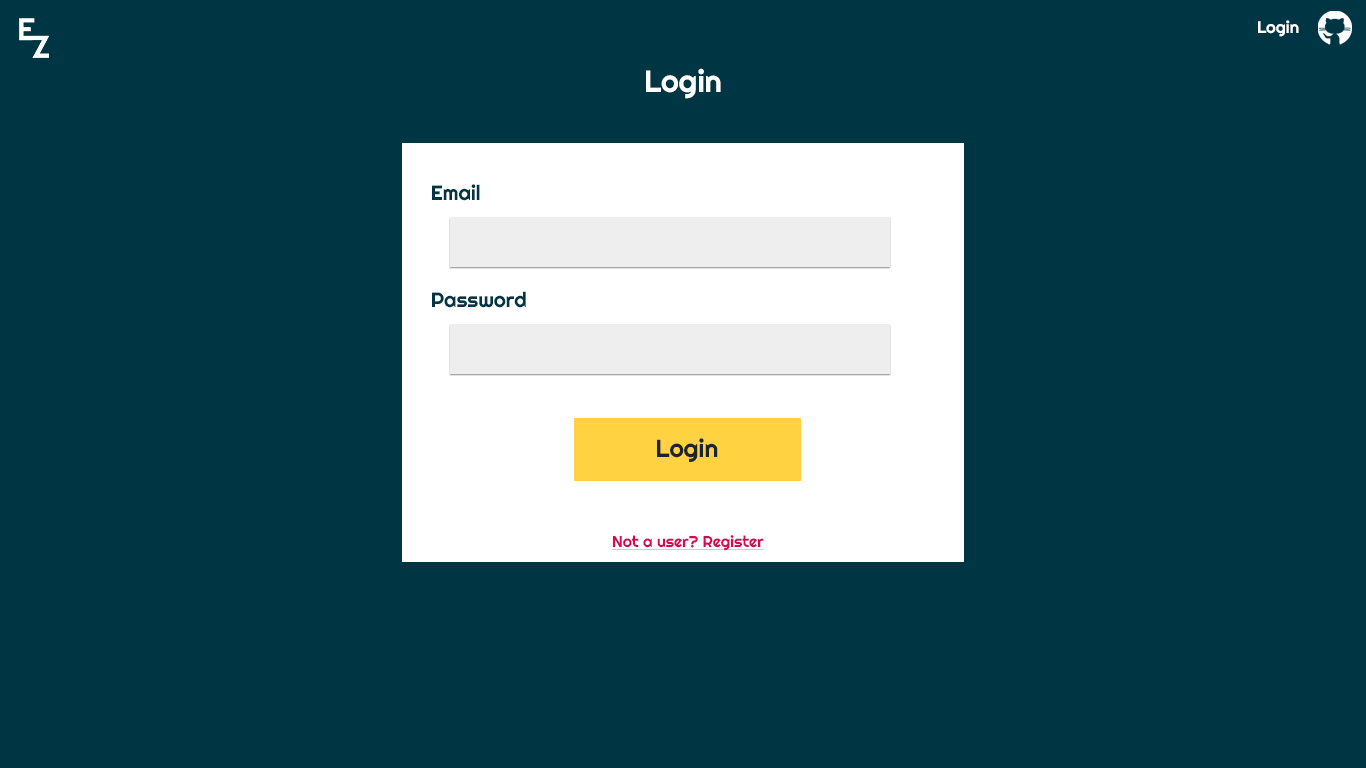
<style>
.page{position:relative;width:1366px;height:768px;background:#003644}
.page>*{position:absolute;margin:0}
.t1{font:16.7px "Righteous-Regular";color:#ffffff}
.t2{font:30.7px "Righteous-Regular";color:#ffffff}
.t3{font:20.7px "Righteous-Regular";color:#003644}
.t4{font:24.7px "Righteous-Regular";color:#1d252c}
.t5{font:15.7px "Righteous-Regular";color:#d30b55;text-decoration:underline}
</style>
<div class="page">
<p class="t1" style="left:1258px;top:20px;width:41px;height:17px">Login</p>
<p class="t2" style="left:646px;top:68px;width:75px;height:31px">Login</p>
<p class="t3" style="left:432px;top:184px;width:48px;height:17px">Email</p>
<p class="t3" style="left:432px;top:291px;width:94px;height:17px">Password</p>
<p class="t4" style="left:657px;top:438px;width:61px;height:24px">Login</p>
<p class="t5" style="left:612px;top:535px;width:152px;height:16px">Not a user? Register</p>
</div>
